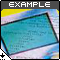
<style>
.page{position:relative;width:60px;height:60px}
.page>*{position:absolute;margin:0}
.t1{font:8px "04b21";color:#ffffff}
</style>
<div class="page">
<p class="t1" style="left:9px;top:2px;width:41px;height:5px">EXAMPLE</p>
</div>
